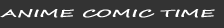
<style>
.page{position:relative;width:224px;height:28px;background:#333333}
.page>*{position:absolute;margin:0}
.t1{font:10px "SegoeScript";color:#ffffff;font-weight:bold;scale:1.89 1}
</style>
<div class="page">
<p class="t1" style="left:0px;top:9px;width:215px;height:9px">ANIME COMIC TIME</p>
</div>
